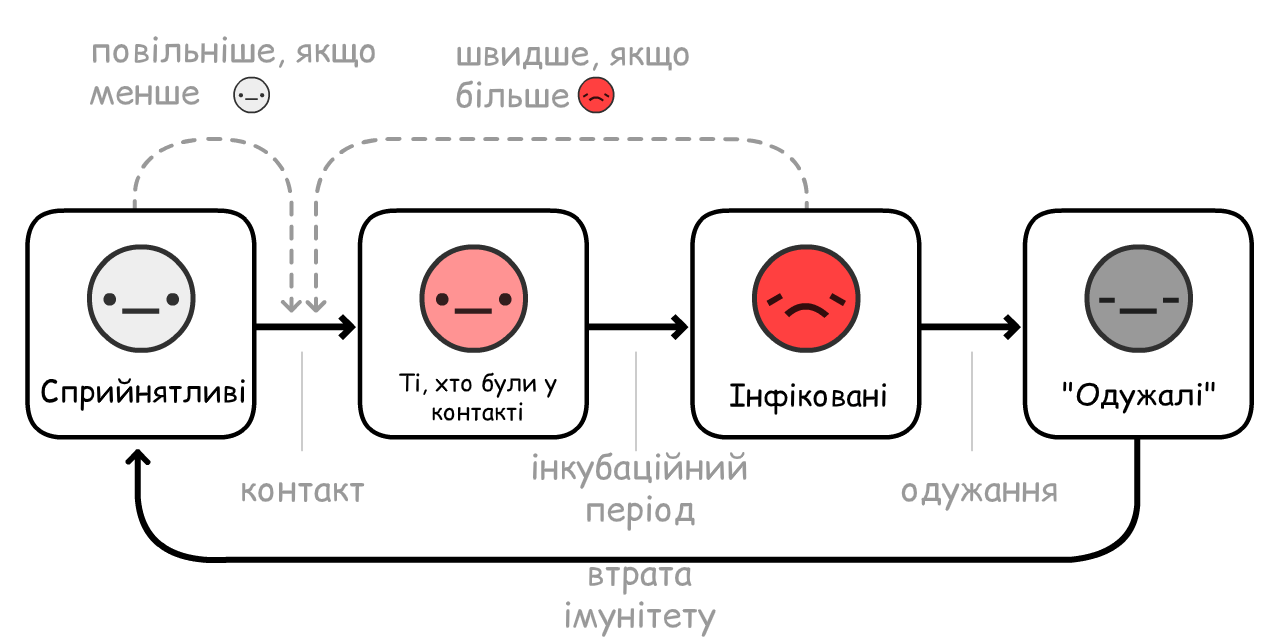
<style>
.page{position:relative;width:1280px;height:640px;background:#ffffff}
.page>*{position:absolute;margin:0}
.t1{font:35px "ComicRelief";color:#999999}
.t2{font:31px "ComicRelief";color:#000000}
.t3{font:24px "ComicRelief";color:#000000}
.t4{font:30px "ComicRelief";color:#000000;scale:1.06 1}
</style>
<div class="page">
<p class="t1" style="left:89px;top:36px;width:286px;height:70px">повільніше, якщо<br>менше</p>
<p class="t1" style="left:456px;top:46px;width:233px;height:63px">швидше, якщо<br>більше</p>
<p class="t2" style="left:41px;top:377px;width:204px;height:34px">Сприйнятливі</p>
<p class="t3" style="left:399px;top:372px;width:159px;height:49px;text-align:center">Ті, хто були у контакті</p>
<p class="t2" style="left:729px;top:383px;width:158px;height:32px">Інфіковані</p>
<p class="t4" style="left:1063px;top:381px;width:152px;height:33px">"Одужалі"</p>
<p class="t1" style="left:533px;top:451px;width:214px;height:80px;text-align:center">інкубаційний<br>період</p>
<p class="t1" style="left:242px;top:482px;width:123px;height:21px">контакт</p>
<p class="t1" style="left:901px;top:482px;width:156px;height:30px">одужання</p>
<p class="t1" style="left:565px;top:566px;width:152px;height:72px;text-align:center">втрата імунітету</p>
</div>
